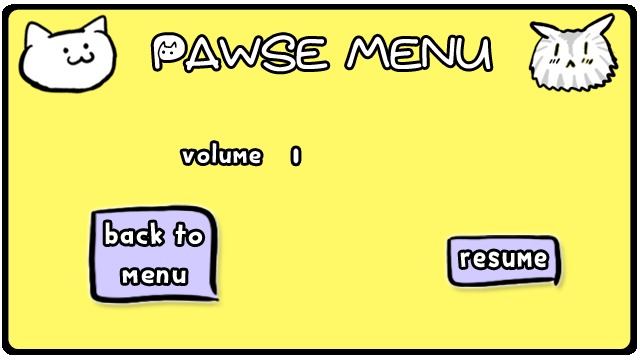
<style>
.page{position:relative;width:640px;height:360px;background:#fff968}
.page>*{position:absolute;margin:0}
.t1{font:48px "QuietMeows";color:#ffffff}
.t2{font:30px "BakeappleDEMO-Regular";color:#ffffff}
.t3{font:32.4px "BakeappleDEMO-Regular";color:#ffffff;scale:1.05 1}
.t4{font:37px "BakeappleDEMO-Regular";color:#ffffff;scale:0.86 1}
</style>
<div class="page">
<p class="t1" style="left:153px;top:35px;width:338px;height:37px">pawse menu</p>
<p class="t2" style="left:182px;top:143px;width:79px;height:21px">volume</p>
<p class="t3" style="left:105px;top:222px;width:98px;height:62px;text-align:center">back to <br>menu</p>
<p class="t3" style="left:105px;top:222px;width:98px;height:62px;text-align:center">back to <br>menu</p>
<p class="t3" style="left:105px;top:222px;width:98px;height:62px;text-align:center">back to <br>menu</p>
<p class="t4" style="left:460px;top:251px;width:87px;height:17px">resume</p>
<p class="t4" style="left:460px;top:251px;width:87px;height:17px">resume</p>
<p class="t4" style="left:460px;top:251px;width:87px;height:17px">resume</p>
</div>
